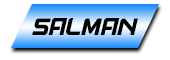
<style>
.page{position:relative;width:170px;height:60px;background:#ffffff}
.page>*{position:absolute;margin:0}
.t1{font:25px "Spantaran";color:#000000}
</style>
<div class="page">
<p class="t1" style="left:32px;top:18px;width:106px;height:17px">SALMAN</p>
</div>
